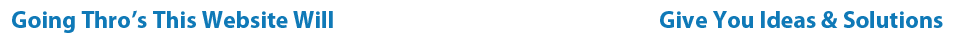
<style>
.page{position:relative;width:955px;height:40px;background:#ffffff}
.page>*{position:absolute;margin:0}
.t1{font:24px "MyriadPro-Bold";color:#0f79b7}
</style>
<div class="page">
<p class="t1" style="left:12px;top:10px;width:931px;height:23px">Going Thro’s This Website Will                                                                   Give You Ideas &amp; Solutions</p>
</div>
